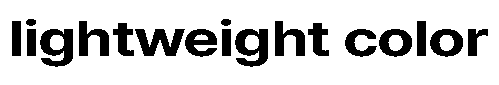
<style>
.page{position:relative;width:499px;height:85px;background:#ffffff}
.page>*{position:absolute;margin:0}
.t1{font:50.2px "Pretendard-Bold";letter-spacing:-0.02em;color:#000000;scale:1.26 1}
</style>
<div class="page">
<p class="t1" style="left:12px;top:19px;width:476px;height:48px">lightweight color</p>
</div>
